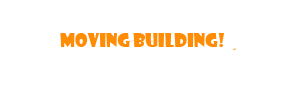
<style>
.page{position:relative;width:284px;height:85px;background:#ffffff}
.page>*{position:absolute;margin:0}
.t1{font:18px "ShowcardGothic-Reg";color:#ff8c05}
</style>
<div class="page">
<p class="t1" style="left:60px;top:33px;width:165px;height:14px">Moving Building!</p>
</div>
